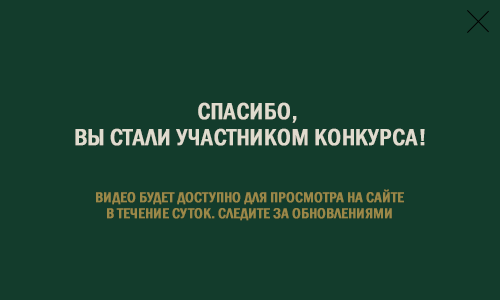
<style>
.page{position:relative;width:500px;height:300px;background:#133c2c}
.page>*{position:absolute;margin:0}
.t1{font:24px/26px "FranklinGothic-MediumCond";color:#e0dbce;text-transform:uppercase;font-weight:bold}
.t2{font:14.8px/16px "FranklinGothic-MediumCond";color:#9b8848;text-transform:uppercase;font-weight:bold}
</style>
<div class="page">
<p class="t1" style="left:75px;top:102px;width:350px;height:44px;text-align:center">Спасибо, <br>вы стали участником конкурса!</p>
<p class="t2" style="left:96px;top:189px;width:308px;height:32px;text-align:center">Видео будет доступно для просмотра на сайте в течение суток. Следите за обновлениями</p>
</div>
